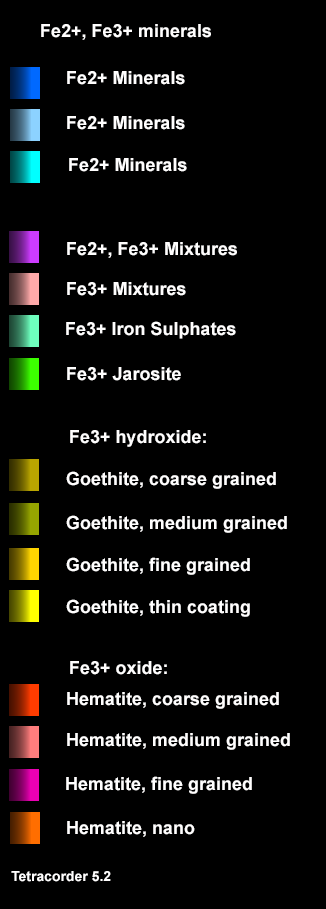
<style>
.page{position:relative;width:326px;height:909px;background:#000000}
.page>*{position:absolute;margin:0}
.t1{font:18px "Arial-BoldMT";color:#fffefe}
.t2{font:14px "Arial-BoldMT";color:#fffefe}
</style>
<div class="page">
<p class="t1" style="left:41px;top:24px;width:170px;height:16px">Fe2+, Fe3+ minerals</p>
<p class="t1" style="left:67px;top:71px;width:118px;height:14px">Fe2+ Minerals</p>
<p class="t1" style="left:67px;top:116px;width:118px;height:14px">Fe2+ Minerals</p>
<p class="t1" style="left:69px;top:158px;width:118px;height:14px">Fe2+ Minerals</p>
<p class="t1" style="left:67px;top:242px;width:170px;height:16px">Fe2+, Fe3+ Mixtures</p>
<p class="t1" style="left:67px;top:282px;width:119px;height:14px">Fe3+ Mixtures</p>
<p class="t1" style="left:66px;top:321px;width:170px;height:18px">Fe3+ Iron Sulphates</p>
<p class="t1" style="left:67px;top:367px;width:114px;height:14px">Fe3+ Jarosite</p>
<p class="t1" style="left:70px;top:430px;width:136px;height:17px">Fe3+ hydroxide:</p>
<p class="t1" style="left:66px;top:471px;width:210px;height:18px">Goethite, coarse grained</p>
<p class="t1" style="left:66px;top:515px;width:221px;height:18px">Goethite, medium grained</p>
<p class="t1" style="left:66px;top:557px;width:184px;height:18px">Goethite, fine grained</p>
<p class="t1" style="left:66px;top:599px;width:184px;height:18px">Goethite, thin coating</p>
<p class="t1" style="left:70px;top:661px;width:97px;height:14px">Fe3+ oxide:</p>
<p class="t1" style="left:67px;top:692px;width:212px;height:17px">Hematite, coarse grained</p>
<p class="t1" style="left:67px;top:733px;width:223px;height:17px">Hematite, medium grained</p>
<p class="t1" style="left:66px;top:776px;width:186px;height:18px">Hematite, fine grained</p>
<p class="t1" style="left:67px;top:821px;width:128px;height:16px">Hematite, nano</p>
<p class="t2" style="left:11px;top:871px;width:100px;height:11px">Tetracorder 5.2</p>
</div>
